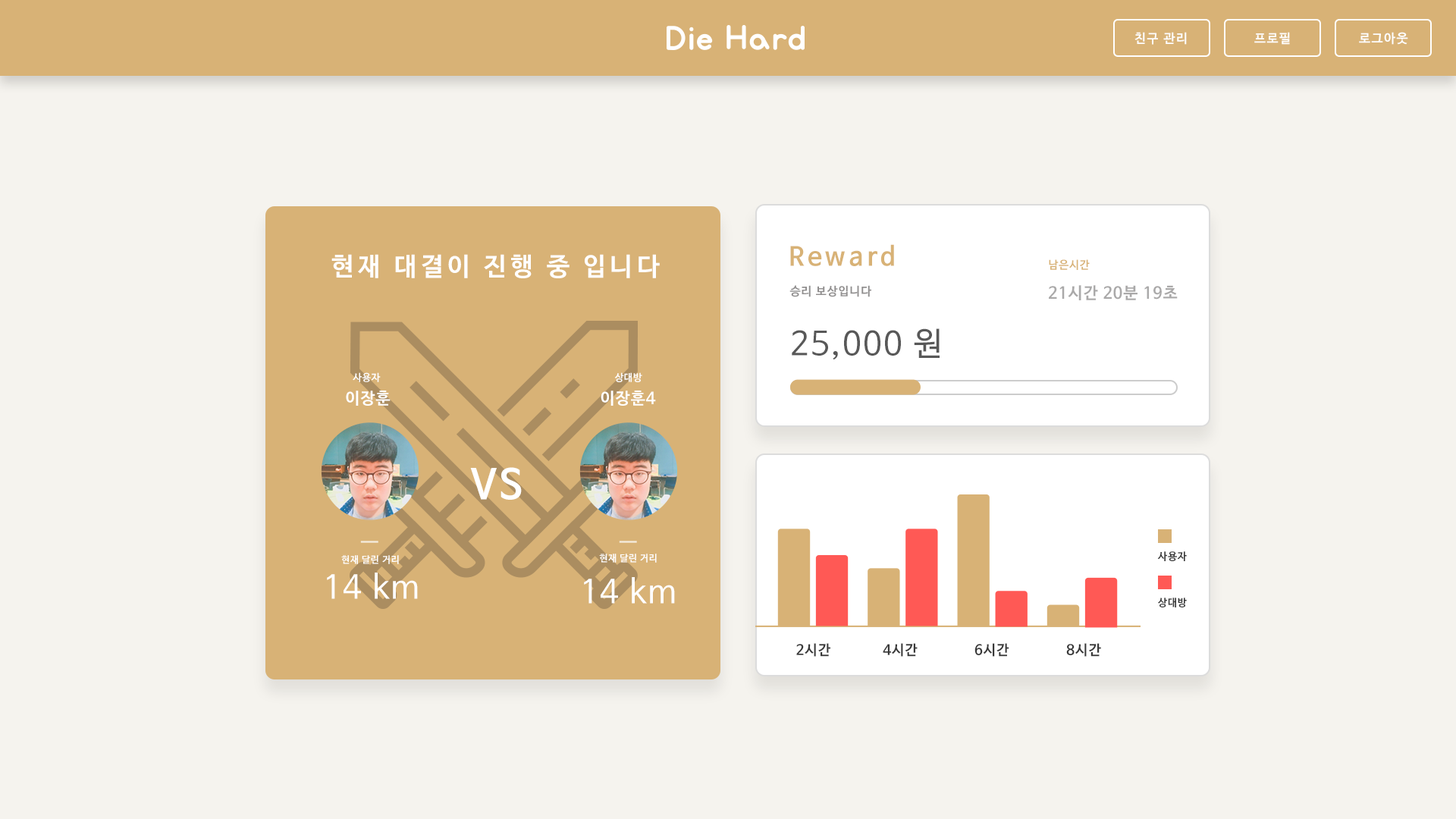
<style>
.page{position:relative;width:1456px;height:819px;background:#f5f3ee}
.page>*{position:absolute;margin:0}
.t1{font:12.6px "NanumBarunGothicBold";letter-spacing:0.1em;color:#fefefe}
.t2{font:12.6px "NanumBarunGothicBold";letter-spacing:0.1em;color:#ffffff}
.t3{font:25.4px "NanumBarunGothicBold";letter-spacing:0.16em;color:#d8b276}
.t4{font:25.4px "NanumBarunGothicBold";letter-spacing:0.16em;color:#ffffff}
.t5{font:11.1px "NanumBarunGothicBold";letter-spacing:0.05em;color:#d8b276}
.t6{font:11.8px "NanumBarunGothicBold";letter-spacing:0.06em;color:#918f8f}
.t7{font:16.2px "NanumBarunGothicBold";letter-spacing:0.05em;color:#aaa9a9}
.t8{font:32.7px "NanumBarunGothic";letter-spacing:0.05em;color:#585858}
.t9{font:9.8px "NanumBarunGothicBold";letter-spacing:0.05em;color:#ffffff}
.t10{font:16.1px "NanumBarunGothicBold";letter-spacing:0.05em;color:#ffffff}
.t11{font:40.6px "NanumBarunGothicBold";letter-spacing:0.05em;color:#ffffff}
.t12{font:9.5px "NanumBarunGothicBold";letter-spacing:0.05em;color:#ffffff}
.t13{font:10.4px "NanumBarunGothicBold";letter-spacing:0.05em;color:#383838}
.t14{font:32.2px "NanumBarunGothic";letter-spacing:0.05em;color:#ffffff}
.t15{font:14.1px "NanumBarunGothicBold";letter-spacing:0.05em;color:#383838}
</style>
<div class="page">
<p class="t1" style="left:1134px;top:32px;width:53px;height:13px">친구 관리</p>
<p class="t2" style="left:1254px;top:32px;width:36px;height:13px">프로필</p>
<p class="t1" style="left:1359px;top:32px;width:49px;height:13px">로그아웃</p>
<p class="t3" style="left:790px;top:244px;width:104px;height:22px">Reward</p>
<p class="t4" style="left:331px;top:254px;width:329px;height:24px">현재 대결이 진행 중 입니다</p>
<p class="t5" style="left:1049px;top:259px;width:41px;height:11px">남은시간</p>
<p class="t6" style="left:789px;top:285px;width:82px;height:12px">승리 보상입니다</p>
<p class="t7" style="left:1049px;top:285px;width:129px;height:15px">21시간 20분 19초</p>
<p class="t8" style="left:792px;top:328px;width:148px;height:31px">25,000 원</p>
<p class="t9" style="left:353px;top:372px;width:28px;height:10px">사용자</p>
<p class="t9" style="left:614px;top:372px;width:28px;height:10px">상대방</p>
<p class="t10" style="left:346px;top:391px;width:45px;height:15px">이장훈</p>
<p class="t10" style="left:601px;top:391px;width:55px;height:15px">이장훈4</p>
<p class="t11" style="left:470px;top:467px;width:52px;height:33px">VS</p>
<p class="t12" style="left:341px;top:555px;width:58px;height:9px">현재 달린 거리</p>
<p class="t12" style="left:599px;top:554px;width:58px;height:9px">현재 달린 거리</p>
<p class="t13" style="left:1157px;top:551px;width:30px;height:10px">사용자</p>
<p class="t14" style="left:327px;top:573px;width:91px;height:26px">14 km</p>
<p class="t14" style="left:584px;top:577px;width:91px;height:27px">14 km</p>
<p class="t13" style="left:1158px;top:598px;width:29px;height:9px">상대방</p>
<p class="t15" style="left:796px;top:643px;width:34px;height:14px">2시간</p>
<p class="t15" style="left:883px;top:643px;width:35px;height:14px">4시간</p>
<p class="t15" style="left:974px;top:643px;width:35px;height:14px">6시간</p>
<p class="t15" style="left:1066px;top:643px;width:35px;height:14px">8시간</p>
</div>
